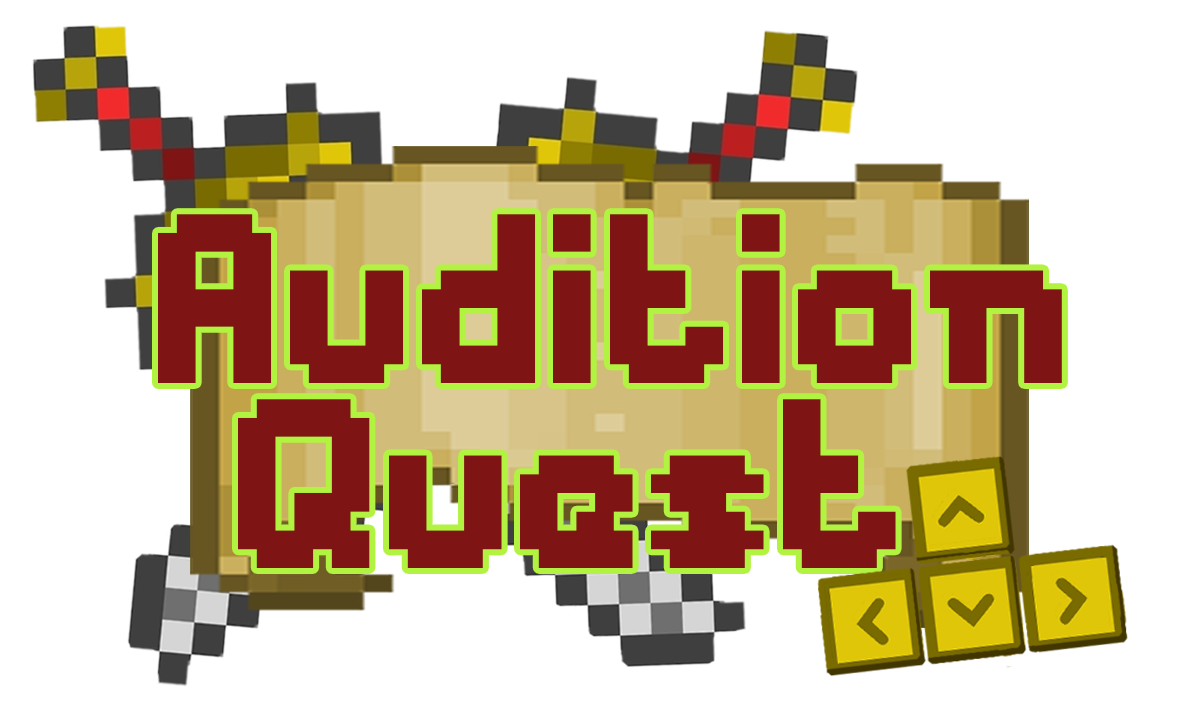
<style>
.page{position:relative;width:1200px;height:720px;background:#ffffff}
.page>*{position:absolute;margin:0}
.t1{font:225.1px "Messe-Duesseldorf";color:#7e1414}
</style>
<div class="page">
<p class="t1" style="left:158px;top:214px;width:904px;height:169px">Audition</p>
<p class="t1" style="left:238px;top:399px;width:658px;height:169px">Quest</p>
</div>
